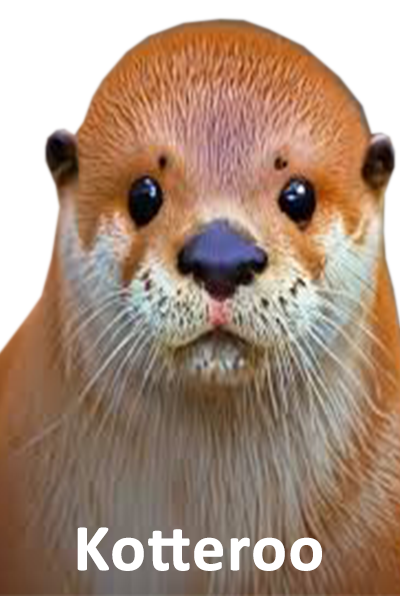
<style>
.page{position:relative;width:400px;height:596px}
.page>*{position:absolute;margin:0}
.t1{font:66px "Calibri-Bold";color:#ffffff;font-weight:bold}
</style>
<div class="page">
<p class="t1" style="left:77px;top:527px;width:245px;height:44px">Kotteroo</p>
</div>
